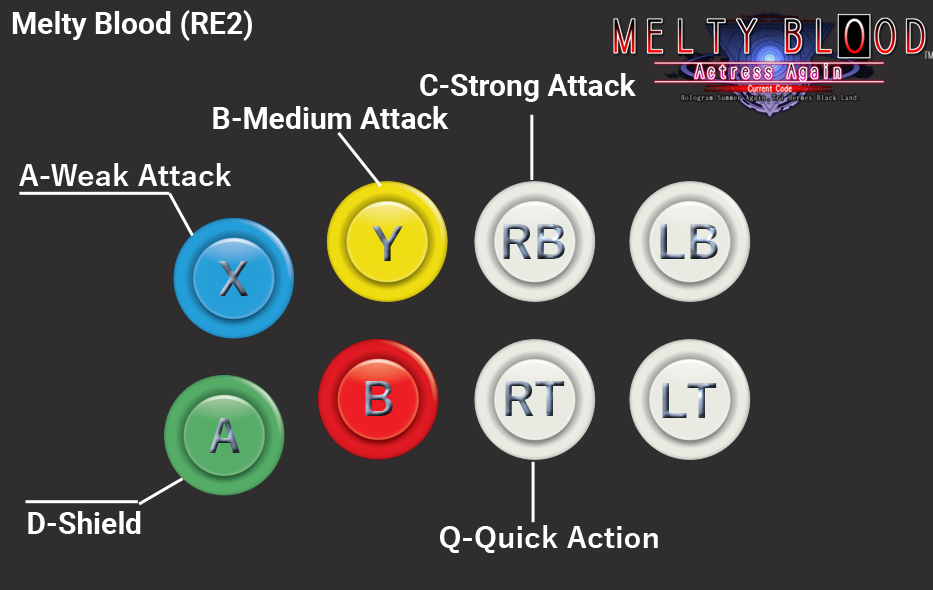
<style>
.page{position:relative;width:933px;height:590px;background:#2f2d2e}
.page>*{position:absolute;margin:0}
.t1{font:30px "Roboto-Bold";color:#ffffff}
.t2{font:30px "YuGothic-Bold";color:#ffffff}
</style>
<div class="page">
<p class="t1" style="left:12px;top:10px;width:240px;height:31px">Melty Blood (RE2)</p>
<p class="t1" style="left:420px;top:73px;width:216px;height:29px">C-Strong Attack</p>
<p class="t1" style="left:213px;top:106px;width:236px;height:23px">B-Medium Attack</p>
<p class="t2" style="left:19px;top:163px;width:212px;height:23px">A-Weak Attack</p>
<p class="t1" style="left:28px;top:511px;width:113px;height:23px">D-Shield</p>
<p class="t2" style="left:440px;top:525px;width:218px;height:28px">Q-Quick Action</p>
</div>
